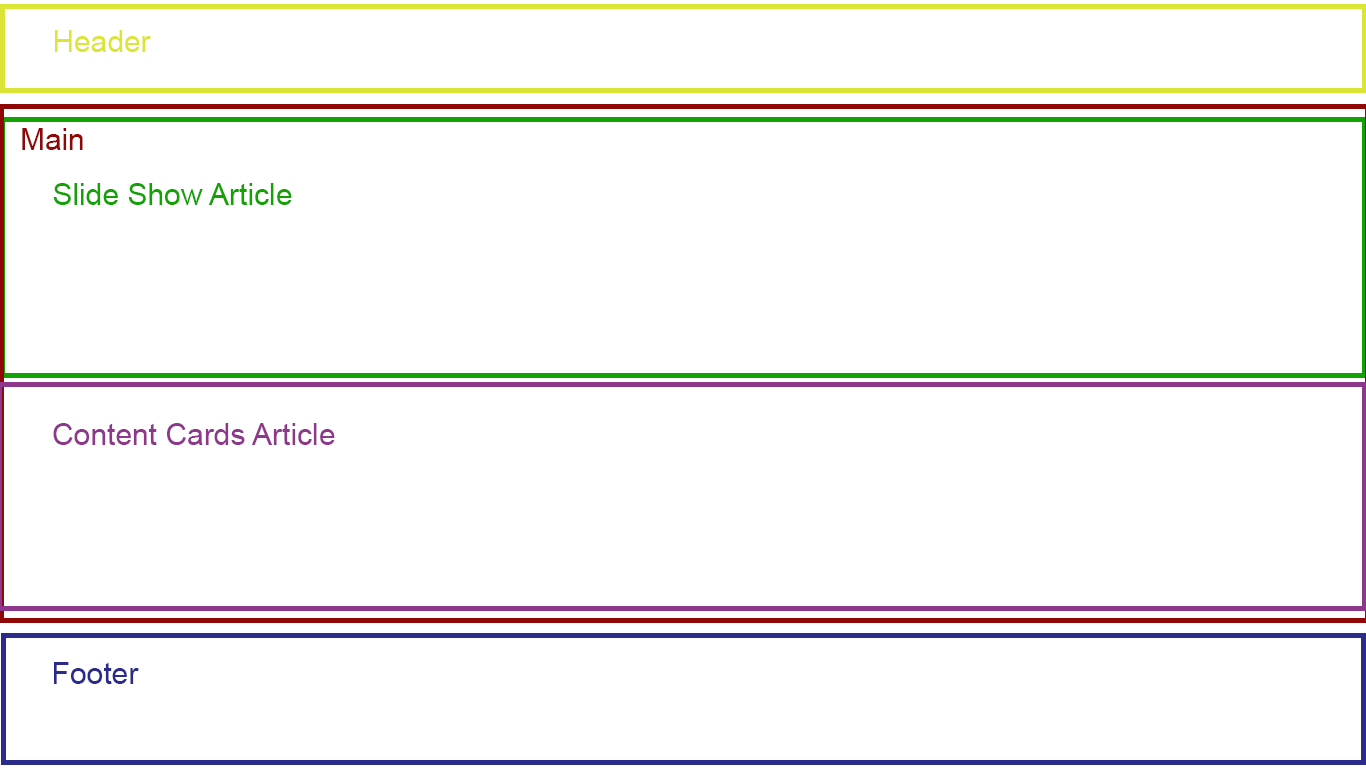
<style>
.page{position:relative;width:1366px;height:768px;background:#ffffff}
.page>*{position:absolute;margin:0}
.t1{font:30px "ArialMT";color:#dbe537}
.t2{font:30px "ArialMT";color:#8f0707}
.t3{font:30px "ArialMT";color:#12a203}
.t4{font:30px "ArialMT";color:#8d388a}
.t5{font:30px "ArialMT";color:#2b2b8c}
</style>
<div class="page">
<p class="t1" style="left:55px;top:30px;width:96px;height:22px">Header</p>
<p class="t2" style="left:22px;top:128px;width:61px;height:22px">Main</p>
<p class="t3" style="left:53px;top:183px;width:239px;height:22px">Slide Show Article</p>
<p class="t4" style="left:53px;top:423px;width:282px;height:22px">Content Cards Article</p>
<p class="t5" style="left:54px;top:662px;width:85px;height:22px">Footer</p>
</div>
